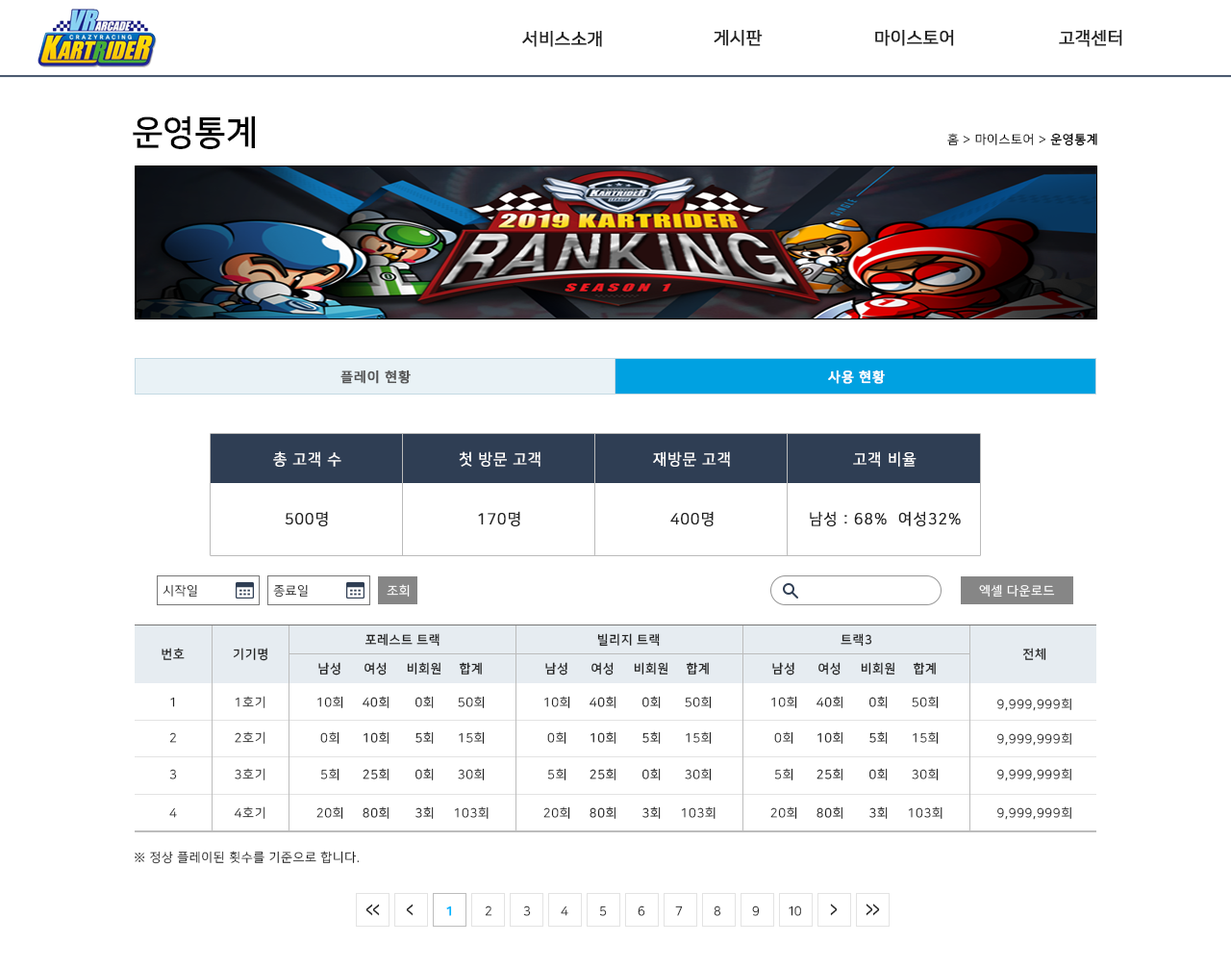
<style>
.page{position:relative;width:1231px;height:969px;background:#ffffff}
.page>*{position:absolute;margin:0}
.t1{font:17.3px "NanumSquareR";color:#222222;font-weight:bold}
.t2{font:34.6px "NanumSquareB";color:#000000}
.t3{font:12.5px "NanumSquareR";letter-spacing:0.05em;color:#000000}
.t4{font:12.5px "NanumSquareB";letter-spacing:0.05em;color:#000000}
.t5{font:13.5px "NanumSquareB";letter-spacing:0.05em;color:#555555;font-weight:bold}
.t6{font:13.5px "NanumSquareB";letter-spacing:0.05em;color:#ffffff;font-weight:bold}
.t7{font:15.4px "NanumSquareR";letter-spacing:0.05em;color:#fffefe;text-transform:uppercase;font-weight:bold}
.t8{font:15.4px "NanumSquareR";letter-spacing:0.05em;color:#222222;text-transform:uppercase;font-weight:bold}
.t9{font:12.5px "NanumSquareR";letter-spacing:0.05em;color:#222222}
.t10{font:12.5px "NanumSquareR";letter-spacing:0.05em;color:#ffffff}
.t11{font:12.5px "NanumSquareB";letter-spacing:0.05em;color:#222222}
.t12{font:12.5px "NanumSquareR";letter-spacing:0.05em}
.t13{font:19.7px "NanumSquareB";letter-spacing:-0.075em;color:#222222;scale:0.63 1}
.t14{font:12.5px "NanumSquareB";letter-spacing:-0.075em;color:#00b6ff;font-weight:bold}
.t15{font:12.5px "NanumSquareR";letter-spacing:-0.075em}
.t16{font:12.5px "NanumSquareR";letter-spacing:-0.075em;color:#222222}
.t17{font:20.3px "NanumSquareB";letter-spacing:-0.075em;color:#222222;scale:0.61 1}
</style>
<div class="page">
<p class="t1" style="left:522px;top:30px;width:80px;height:17px">서비스소개</p>
<p class="t1" style="left:714px;top:29px;width:49px;height:17px">게시판</p>
<p class="t1" style="left:875px;top:29px;width:79px;height:17px">마이스토어</p>
<p class="t1" style="left:1059px;top:29px;width:63px;height:17px">고객센터</p>
<p class="t2" style="left:133px;top:115px;width:122px;height:34px">운영통계</p>
<p class="t3" style="left:947px;top:133px;width:150px;height:13px">홈 &gt; 마이스토어 &gt; <span class="t4">운영통계</span></p>
<p class="t5" style="left:340px;top:369px;width:71px;height:15px">플레이 현황</p>
<p class="t6" style="left:828px;top:369px;width:57px;height:15px">사용 현황</p>
<p class="t7" style="left:273px;top:451px;width:68px;height:15px">총 고객 수</p>
<p class="t7" style="left:459px;top:451px;width:82px;height:15px">첫 방문 고객</p>
<p class="t7" style="left:653px;top:451px;width:77px;height:15px">재방문 고객</p>
<p class="t7" style="left:853px;top:451px;width:64px;height:15px">고객 비율</p>
<p class="t8" style="left:285px;top:511px;width:43px;height:15px">500명</p>
<p class="t8" style="left:478px;top:511px;width:42px;height:15px">170명</p>
<p class="t8" style="left:670px;top:511px;width:44px;height:15px">400명</p>
<p class="t8" style="left:810px;top:511px;width:151px;height:15px">남성 : 68%  여성32%</p>
<p class="t9" style="left:163px;top:584px;width:34px;height:12px">시작일</p>
<p class="t9" style="left:273px;top:584px;width:35px;height:13px">종료일</p>
<p class="t10" style="left:387px;top:584px;width:23px;height:12px">조회</p>
<p class="t10" style="left:979px;top:584px;width:76px;height:12px">엑셀 다운로드</p>
<p class="t11" style="left:365px;top:633px;width:75px;height:13px">포레스트 트랙</p>
<p class="t11" style="left:597px;top:633px;width:63px;height:13px">빌리지 트랙</p>
<p class="t11" style="left:841px;top:633px;width:31px;height:13px">트랙3</p>
<p class="t11" style="left:162px;top:647px;width:23px;height:13px">번호</p>
<p class="t11" style="left:233px;top:647px;width:34px;height:14px">기기명</p>
<p class="t11" style="left:1022px;top:647px;width:24px;height:13px">전체</p>
<p class="t11" style="left:318px;top:662px;width:22px;height:13px">남성</p>
<p class="t11" style="left:365px;top:662px;width:22px;height:13px">여성</p>
<p class="t11" style="left:407px;top:662px;width:34px;height:12px">비회원</p>
<p class="t11" style="left:459px;top:662px;width:23px;height:12px">합계</p>
<p class="t11" style="left:545px;top:662px;width:22px;height:13px">남성</p>
<p class="t11" style="left:592px;top:662px;width:22px;height:13px">여성</p>
<p class="t11" style="left:634px;top:662px;width:34px;height:12px">비회원</p>
<p class="t11" style="left:686px;top:662px;width:23px;height:12px">합계</p>
<p class="t11" style="left:772px;top:662px;width:22px;height:13px">남성</p>
<p class="t11" style="left:819px;top:662px;width:22px;height:13px">여성</p>
<p class="t11" style="left:861px;top:662px;width:34px;height:12px">비회원</p>
<p class="t11" style="left:913px;top:662px;width:23px;height:12px">합계</p>
<p class="t9" style="left:170px;top:696px;width:5px;height:11px">1</p>
<p class="t12" style="left:235px;top:695px;width:30px;height:13px">1호기</p>
<p class="t9" style="left:317px;top:695px;width:26px;height:13px">10회</p>
<p class="t9" style="left:363px;top:695px;width:26px;height:13px">40회</p>
<p class="t12" style="left:416px;top:695px;width:18px;height:13px">0회</p>
<p class="t9" style="left:458px;top:695px;width:27px;height:13px">50회</p>
<p class="t9" style="left:544px;top:695px;width:26px;height:13px">10회</p>
<p class="t9" style="left:590px;top:695px;width:26px;height:13px">40회</p>
<p class="t12" style="left:643px;top:695px;width:18px;height:13px">0회</p>
<p class="t9" style="left:685px;top:695px;width:27px;height:13px">50회</p>
<p class="t9" style="left:771px;top:695px;width:26px;height:13px">10회</p>
<p class="t9" style="left:817px;top:695px;width:26px;height:13px">40회</p>
<p class="t12" style="left:869px;top:695px;width:19px;height:13px">0회</p>
<p class="t9" style="left:912px;top:695px;width:27px;height:13px">50회</p>
<p class="t9" style="left:997px;top:697px;width:74px;height:14px">9,999,999회</p>
<p class="t12" style="left:169px;top:732px;width:8px;height:11px">2</p>
<p class="t12" style="left:235px;top:731px;width:30px;height:12px">2호기</p>
<p class="t9" style="left:320px;top:731px;width:20px;height:12px">0회</p>
<p class="t9" style="left:364px;top:731px;width:25px;height:12px">10회</p>
<p class="t9" style="left:416px;top:731px;width:18px;height:12px">5회</p>
<p class="t9" style="left:459px;top:731px;width:26px;height:12px">15회</p>
<p class="t9" style="left:547px;top:731px;width:20px;height:12px">0회</p>
<p class="t9" style="left:591px;top:731px;width:25px;height:12px">10회</p>
<p class="t9" style="left:643px;top:731px;width:18px;height:12px">5회</p>
<p class="t9" style="left:686px;top:731px;width:26px;height:12px">15회</p>
<p class="t9" style="left:774px;top:731px;width:20px;height:12px">0회</p>
<p class="t9" style="left:818px;top:731px;width:25px;height:12px">10회</p>
<p class="t9" style="left:869px;top:731px;width:19px;height:12px">5회</p>
<p class="t9" style="left:913px;top:731px;width:26px;height:12px">15회</p>
<p class="t9" style="left:997px;top:732px;width:74px;height:13px">9,999,999회</p>
<p class="t9" style="left:169px;top:769px;width:8px;height:10px">3</p>
<p class="t12" style="left:235px;top:768px;width:30px;height:12px">3호기</p>
<p class="t9" style="left:320px;top:768px;width:20px;height:12px">5회</p>
<p class="t9" style="left:363px;top:768px;width:26px;height:12px">25회</p>
<p class="t12" style="left:416px;top:768px;width:18px;height:12px">0회</p>
<p class="t9" style="left:458px;top:768px;width:27px;height:12px">30회</p>
<p class="t9" style="left:547px;top:768px;width:20px;height:12px">5회</p>
<p class="t9" style="left:590px;top:768px;width:26px;height:12px">25회</p>
<p class="t12" style="left:643px;top:768px;width:18px;height:12px">0회</p>
<p class="t9" style="left:685px;top:768px;width:27px;height:12px">30회</p>
<p class="t9" style="left:774px;top:768px;width:20px;height:12px">5회</p>
<p class="t9" style="left:817px;top:768px;width:26px;height:12px">25회</p>
<p class="t12" style="left:869px;top:768px;width:19px;height:12px">0회</p>
<p class="t9" style="left:912px;top:768px;width:27px;height:12px">30회</p>
<p class="t9" style="left:997px;top:768px;width:74px;height:13px">9,999,999회</p>
<p class="t12" style="left:169px;top:807px;width:8px;height:11px">4</p>
<p class="t12" style="left:234px;top:806px;width:31px;height:13px">4호기</p>
<p class="t9" style="left:316px;top:806px;width:27px;height:13px">20회</p>
<p class="t9" style="left:363px;top:806px;width:26px;height:13px">80회</p>
<p class="t9" style="left:416px;top:806px;width:18px;height:13px">3회</p>
<p class="t9" style="left:454px;top:806px;width:35px;height:13px">103회</p>
<p class="t9" style="left:543px;top:806px;width:27px;height:13px">20회</p>
<p class="t9" style="left:590px;top:806px;width:26px;height:13px">80회</p>
<p class="t9" style="left:643px;top:806px;width:18px;height:13px">3회</p>
<p class="t9" style="left:681px;top:806px;width:35px;height:13px">103회</p>
<p class="t9" style="left:770px;top:806px;width:27px;height:13px">20회</p>
<p class="t9" style="left:817px;top:806px;width:26px;height:13px">80회</p>
<p class="t9" style="left:869px;top:806px;width:19px;height:13px">3회</p>
<p class="t9" style="left:908px;top:806px;width:35px;height:13px">103회</p>
<p class="t9" style="left:997px;top:806px;width:74px;height:13px">9,999,999회</p>
<p class="t9" style="left:135px;top:850px;width:225px;height:14px">※ 정상 플레이된 횟수를 기준으로 합니다.</p>
<p class="t13" style="left:365px;top:903px;width:15px;height:13px">&lt;&lt;</p>
<p class="t13" style="left:406px;top:903px;width:8px;height:13px">&lt;</p>
<p class="t14" style="left:446px;top:905px;width:6px;height:11px">1</p>
<p class="t15" style="left:485px;top:905px;width:7px;height:11px">2</p>
<p class="t16" style="left:523px;top:905px;width:8px;height:11px">3</p>
<p class="t15" style="left:561px;top:905px;width:7px;height:11px">4</p>
<p class="t15" style="left:599px;top:905px;width:8px;height:11px">5</p>
<p class="t15" style="left:638px;top:905px;width:7px;height:11px">6</p>
<p class="t16" style="left:675px;top:905px;width:8px;height:11px">7</p>
<p class="t15" style="left:714px;top:905px;width:7px;height:11px">8</p>
<p class="t16" style="left:752px;top:905px;width:8px;height:11px">9</p>
<p class="t16" style="left:789px;top:905px;width:12px;height:11px">10</p>
<p class="t17" style="left:830px;top:903px;width:8px;height:13px;rotate:180deg">&lt;</p>
<p class="t17" style="left:866px;top:903px;width:14px;height:13px;rotate:180deg">&lt;&lt;</p>
</div>
